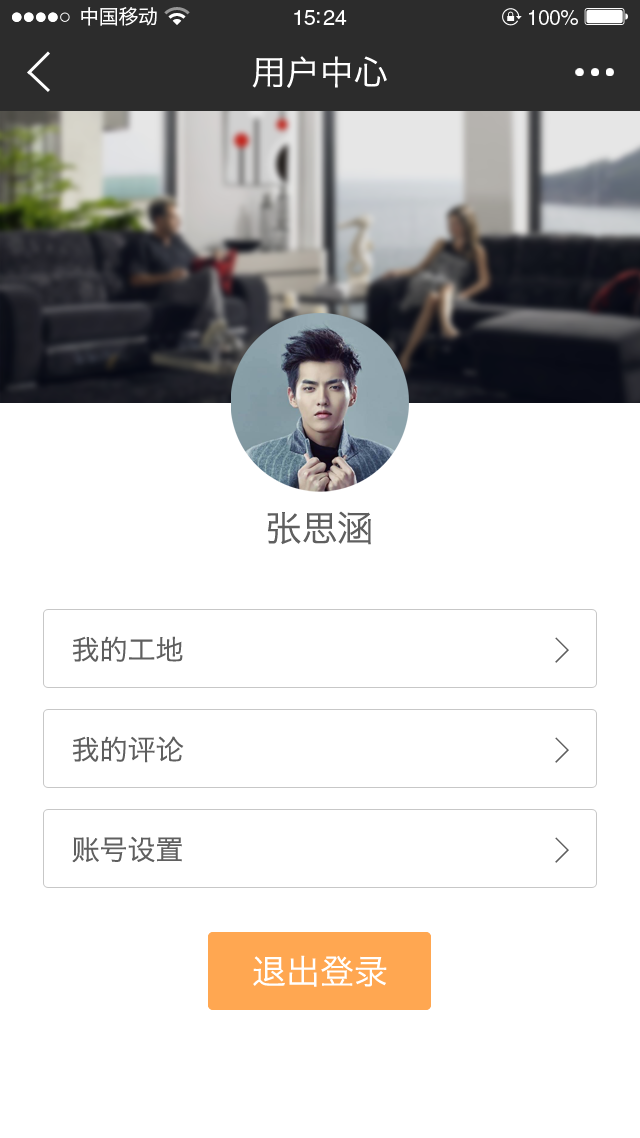
<style>
.page{position:relative;width:640px;height:1138px;background:#ffffff}
.page>*{position:absolute;margin:0}
.t1{font:20px "HiraginoSansGB-W3";letter-spacing:-0.02em;color:#ffffff}
.t2{font:21.5px "HelveticaLTStd-Roman";letter-spacing:-0.02em;color:#ffffff}
.t3{font:20.6px "HelveticaLTStd-Roman";letter-spacing:-0.02em;color:#ffffff}
.t4{font:34px "HiraginoSansGB-W3";color:#ffffff}
.t5{font:36px "HiraginoSansGB-W3";color:#5f5f5f}
.t6{font:28px/100px "HiraginoSansGB-W3";color:#5f5f5f}
.t7{font:36px/100px "SimSun";color:#5f5f5f}
</style>
<div class="page">
<p class="t1" style="left:81px;top:7px;width:76px;height:19px">中国移动</p>
<p class="t2" style="left:294px;top:10px;width:53px;height:15px">15:24</p>
<p class="t3" style="left:529px;top:10px;width:49px;height:15px">100%</p>
<p class="t4" style="left:252px;top:56px;width:135px;height:32px">用户中心</p>
<p class="t5" style="left:267px;top:511px;width:104px;height:34px">张思涵</p>
<p class="t6" style="left:72px;top:636px;width:112px;height:227px">我的工地<br>我的评论<br>账号设置</p>
<p class="t7" style="left:555px;top:637px;width:14px;height:226px">&gt;<br>&gt;<br>&gt;</p>
<p class="t4" style="left:253px;top:955px;width:134px;height:32px">退出登录</p>
</div>
